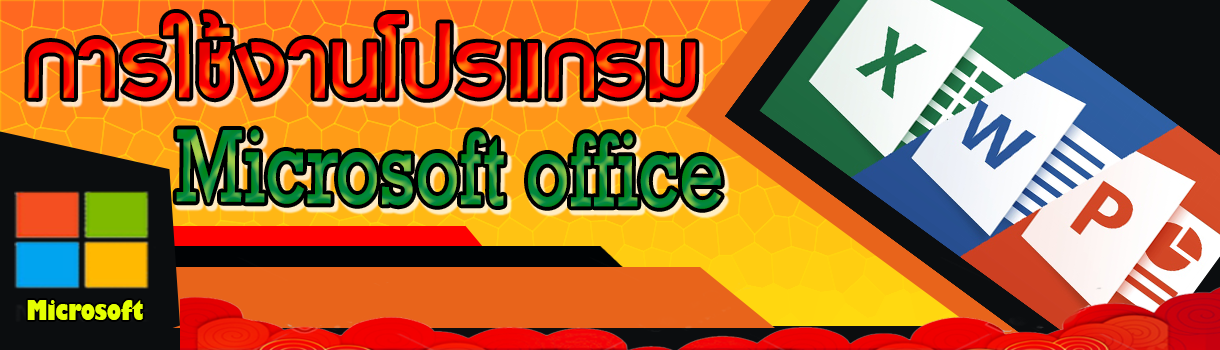
<style>
.page{position:relative;width:1220px;height:350px}
.page>*{position:absolute;margin:0}
.t1{font:99.9px "TorsilpKanittha";color:#ff0404}
.t2{font:105.1px "Rockwell";scale:0.74 1}
.t3{font:87.6px "LucidaBright";scale:0.74 1}
.t4{font:25.9px "GillSans-UltraBold";color:#e4ff01;scale:0.76 1}
</style>
<div class="page">
<p class="t1" style="left:28px;top:13px;width:668px;height:86px">การใช้งานโปรแกรม</p>
<p class="t2" style="left:176px;top:129px;width:545px;height:80px;rotate:1deg"><span class="t3"> </span>Microsoft office</p>
<p class="t4" style="left:27px;top:300px;width:116px;height:20px">Microsoft</p>
</div>
